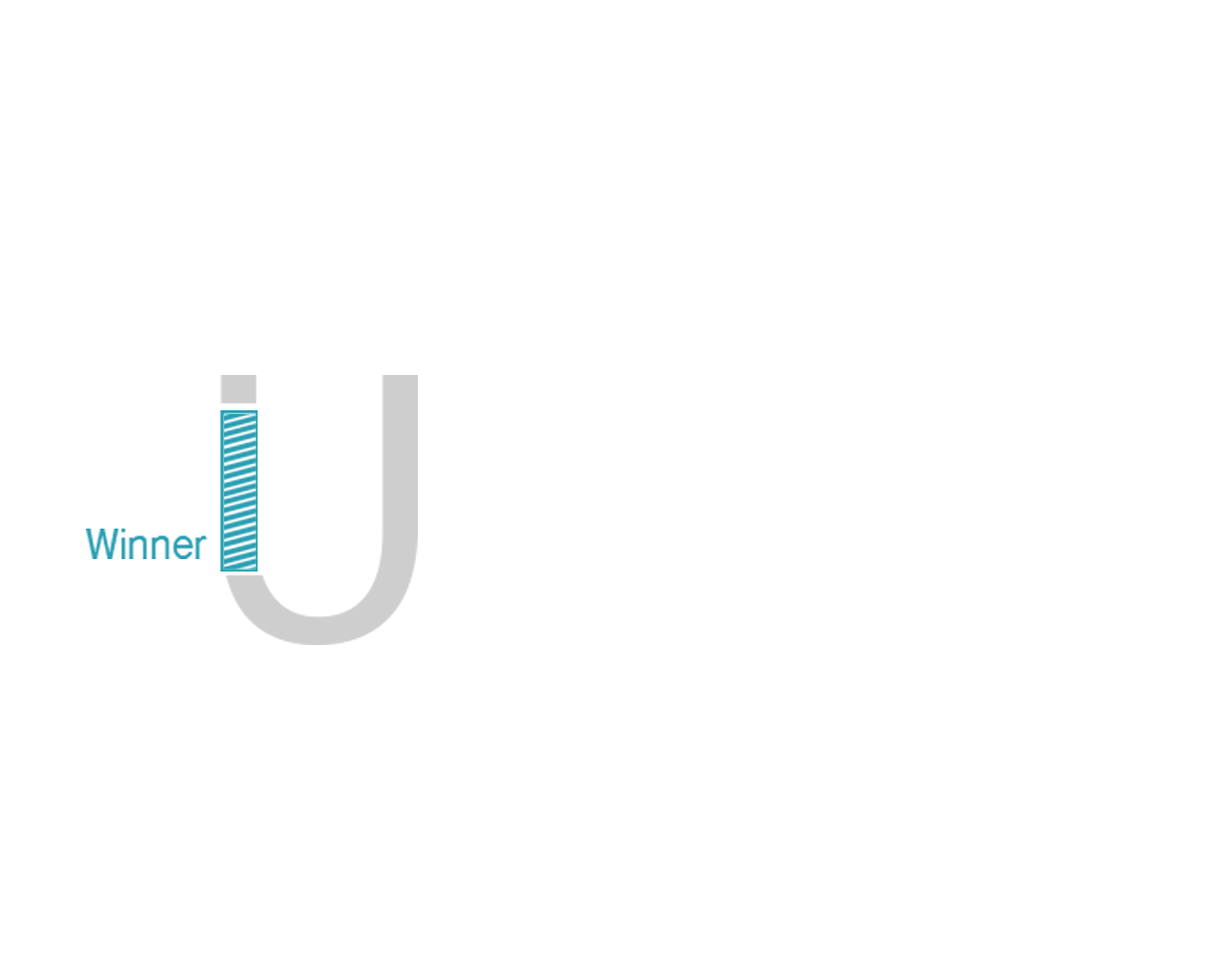
<style>
.page{position:relative;width:1221px;height:977px;background:#ffffff}
.page>*{position:absolute;margin:0}
.t1{font:44.7px "InaiMathi";color:#299eb2}
</style>
<div class="page">
<p class="t1" style="left:86px;top:528px;width:122px;height:31px">Winner</p>
</div>
